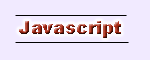
<style>
.page{position:relative;width:150px;height:60px;background:#f1eaff}
.page>*{position:absolute;margin:0}
.t1{font:18px "Arial-Black"}
</style>
<div class="page">
<p class="t1" style="left:19px;top:21px;width:102px;height:17px">Javascript</p>
</div>
